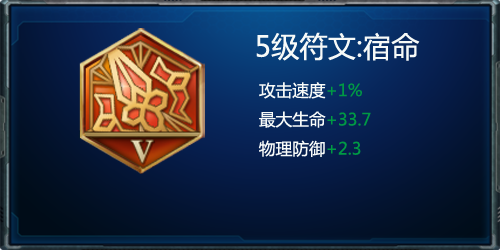
<style>
.page{position:relative;width:500px;height:250px}
.page>*{position:absolute;margin:0}
.t1{font:28.3px "MicrosoftYaHei";color:#f7faf8}
.t2{font:16.7px "MicrosoftYaHei";color:#f7faf8}
.t3{font:16.7px "MicrosoftYaHei";color:#009944}
</style>
<div class="page">
<p class="t1" style="left:256px;top:32px;width:164px;height:125px;text-align:center">5级符文:宿命<br><span class="t2">  攻击速度</span><span class="t3">+1%<br></span><span class="t2">  最大生命</span><span class="t3">+33.7<br></span><span class="t2">  物理防御</span><span class="t3">+2.3</span></p>
</div>
